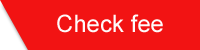
<style>
.page{position:relative;width:200px;height:50px;background:#f21313}
.page>*{position:absolute;margin:0}
.t1{font:24px "ArialMT";color:#fefafa}
</style>
<div class="page">
<p class="t1" style="left:57px;top:14px;width:106px;height:19px">Check fee</p>
</div>
